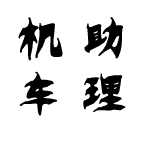
<style>
.page{position:relative;width:144px;height:144px;background:#ffffff}
.page>*{position:absolute;margin:0}
.t1{font:48px/18px "Tensentype-QianNvJF";letter-spacing:0.025em;color:#000000}
</style>
<div class="page">
<p class="t1" style="left:18px;top:17px;width:45px;height:99px">机<br><br><br>车</p>
<p class="t1" style="left:83px;top:17px;width:43px;height:95px">助<br><br><br>理</p>
</div>
